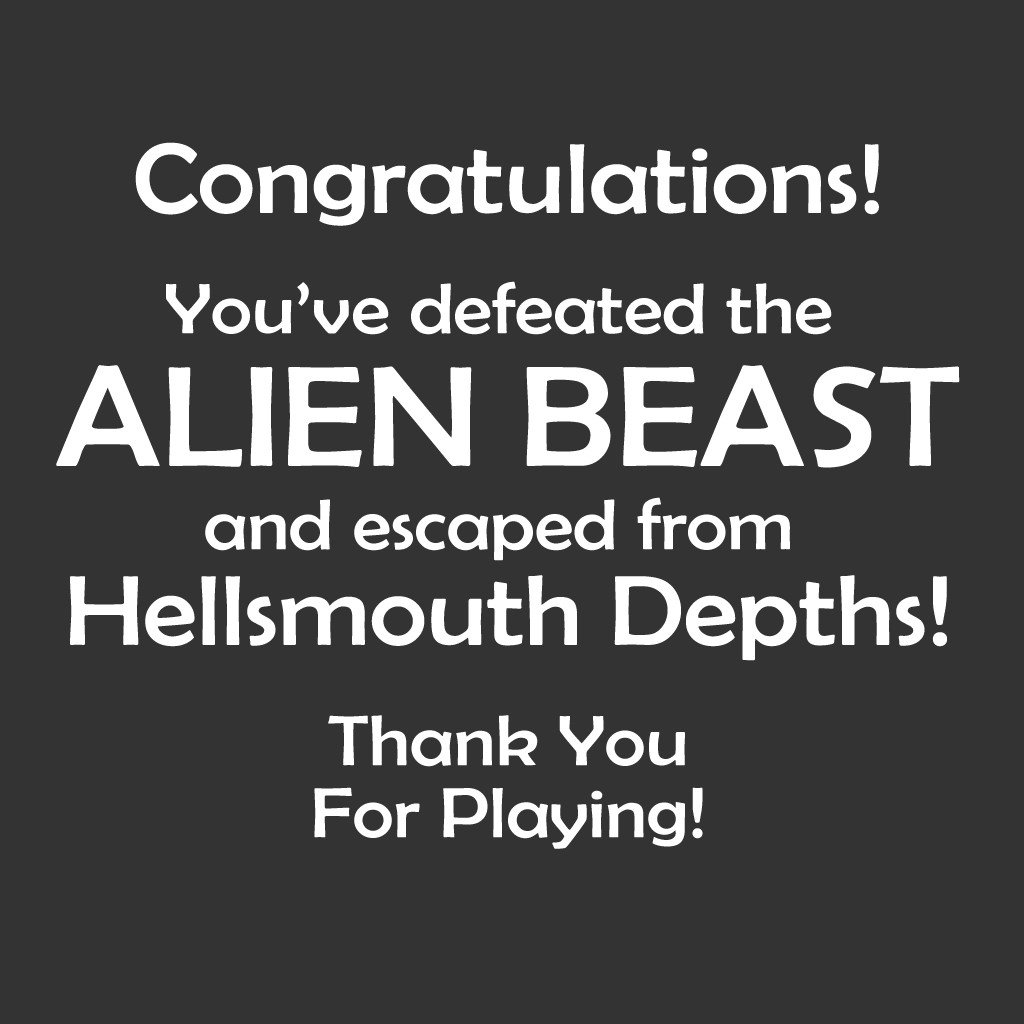
<style>
.page{position:relative;width:1024px;height:1024px;background:#333333}
.page>*{position:absolute;margin:0}
.t1{font:72px/72px "BerlinSansFB-Reg";color:#ffffff;scale:1.1 1}
.t2{font:100px/72px "BerlinSansFB-Reg";color:#ffffff;scale:1.1 1}
.t3{font:144px/72px "BerlinSansFB-Reg";color:#ffffff;scale:1.1 1}
</style>
<div class="page">
<p class="t1" style="left:56px;top:142px;width:904px;height:707px;text-align:center"><span class="t2">Congratulations!<br></span><br>You’ve defeated the <br><span class="t3">ALIEN BEAST<br></span><br>and escaped from <br><span class="t2">Hellsmouth Depths!<br></span><br>Thank You<br>For Playing!</p>
</div>
